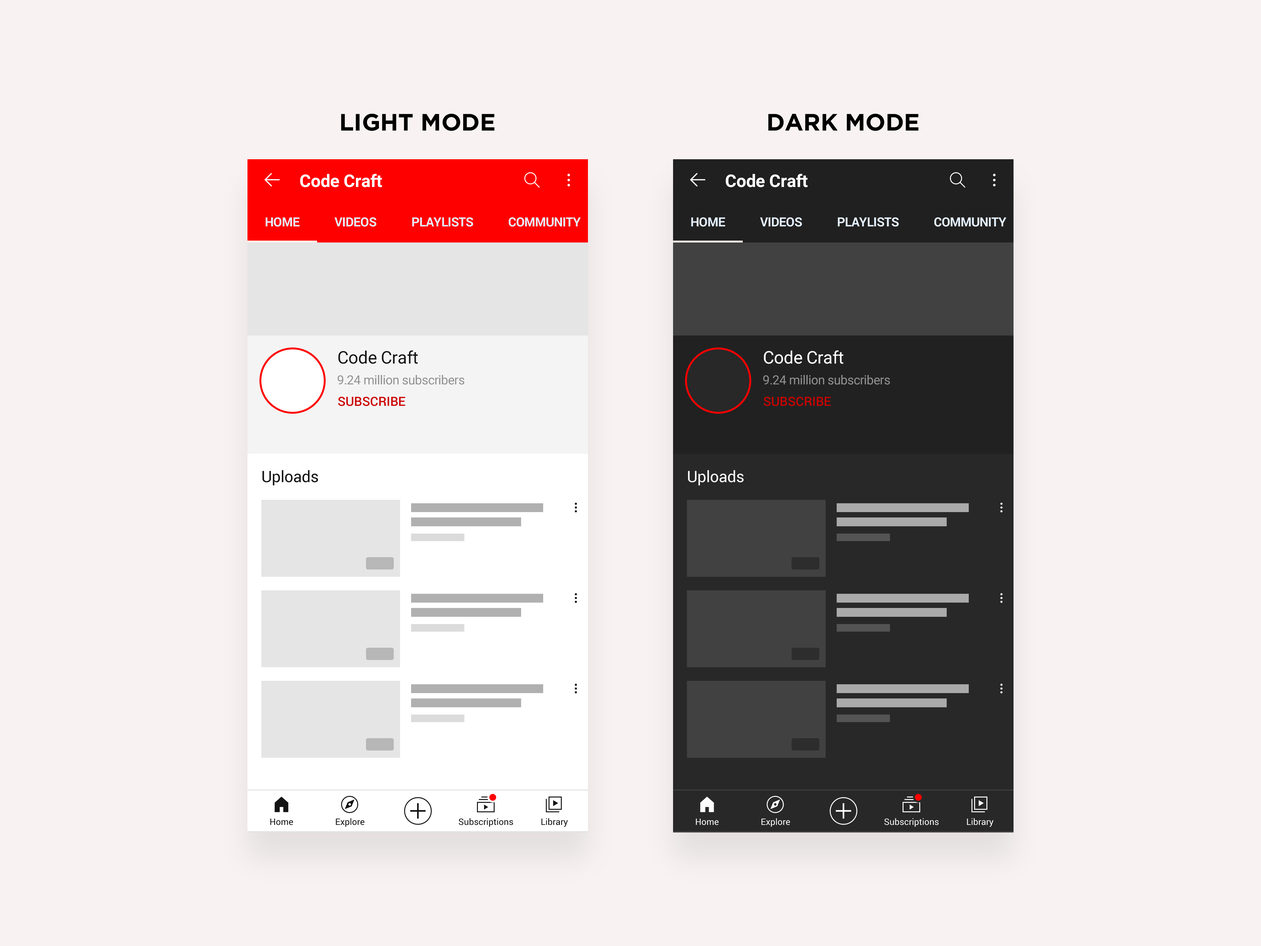
<style>
.page{position:relative;width:1261px;height:946px;background:#f8f2f2}
.page>*{position:absolute;margin:0}
.t1{font:23.6px "Gotham-Bold";color:#000000}
.t2{font:17.3px "Roboto-Bold";letter-spacing:-0.005em;color:#ffffff}
.t3{font:12.6px "Roboto-Bold";letter-spacing:-0.025em;color:#e5f1ff;text-transform:uppercase}
.t4{font:17.3px "Roboto-Regular";letter-spacing:-0.01em;color:#131313}
.t5{font:17.3px "Roboto-Regular";letter-spacing:-0.01em;color:#ffffff}
.t6{font:12.6px "Roboto-Regular";letter-spacing:-0.02em;color:#909090}
.t7{font:12.6px "Roboto-Medium";color:#cc0001}
.t8{font:15.8px "Roboto-Regular";letter-spacing:-0.01em;color:#131313}
.t9{font:15.8px "Roboto-Regular";letter-spacing:-0.01em;color:#ffffff}
.t10{font:8.8px "Roboto-Regular";color:#131313}
.t11{font:8.8px "Roboto-Regular";color:#ffffff}
</style>
<div class="page">
<p class="t1" style="left:341px;top:113px;width:154px;height:18px">LIGHT MODE</p>
<p class="t1" style="left:768px;top:113px;width:151px;height:18px">DARK MODE</p>
<p class="t2" style="left:300px;top:174px;width:82px;height:13px">Code Craft</p>
<p class="t2" style="left:726px;top:174px;width:82px;height:13px">Code Craft</p>
<p class="t3" style="left:265px;top:217px;width:35px;height:10px">Home</p>
<p class="t3" style="left:334px;top:217px;width:42px;height:10px">Videos</p>
<p class="t3" style="left:412px;top:217px;width:61px;height:10px">playlists</p>
<p class="t3" style="left:508px;top:217px;width:73px;height:10px">Community</p>
<p class="t3" style="left:691px;top:217px;width:34px;height:10px">Home</p>
<p class="t3" style="left:760px;top:217px;width:42px;height:10px">Videos</p>
<p class="t3" style="left:838px;top:217px;width:61px;height:10px">playlists</p>
<p class="t3" style="left:934px;top:217px;width:73px;height:10px">Community</p>
<p class="t4" style="left:338px;top:350px;width:80px;height:14px">Code Craft</p>
<p class="t5" style="left:764px;top:350px;width:79px;height:14px">Code Craft</p>
<p class="t6" style="left:338px;top:375px;width:126px;height:10px">9.24 million subscribers</p>
<p class="t6" style="left:763px;top:375px;width:127px;height:10px">9.24 million subscribers</p>
<p class="t7" style="left:338px;top:397px;width:67px;height:9px">SUBSCRIBE</p>
<p class="t7" style="left:763px;top:397px;width:68px;height:9px">SUBSCRIBE</p>
<p class="t8" style="left:262px;top:470px;width:56px;height:15px">Uploads</p>
<p class="t9" style="left:688px;top:470px;width:56px;height:15px">Uploads</p>
<p class="t10" style="left:270px;top:818px;width:23px;height:7px">Home</p>
<p class="t10" style="left:336px;top:818px;width:28px;height:9px">Explore</p>
<p class="t10" style="left:459px;top:818px;width:54px;height:9px">Subscriptions</p>
<p class="t10" style="left:541px;top:818px;width:27px;height:9px">Library</p>
<p class="t11" style="left:696px;top:818px;width:23px;height:7px">Home</p>
<p class="t11" style="left:761px;top:818px;width:29px;height:9px">Explore</p>
<p class="t11" style="left:884px;top:818px;width:55px;height:9px">Subscriptions</p>
<p class="t11" style="left:967px;top:818px;width:27px;height:9px">Library</p>
</div>
